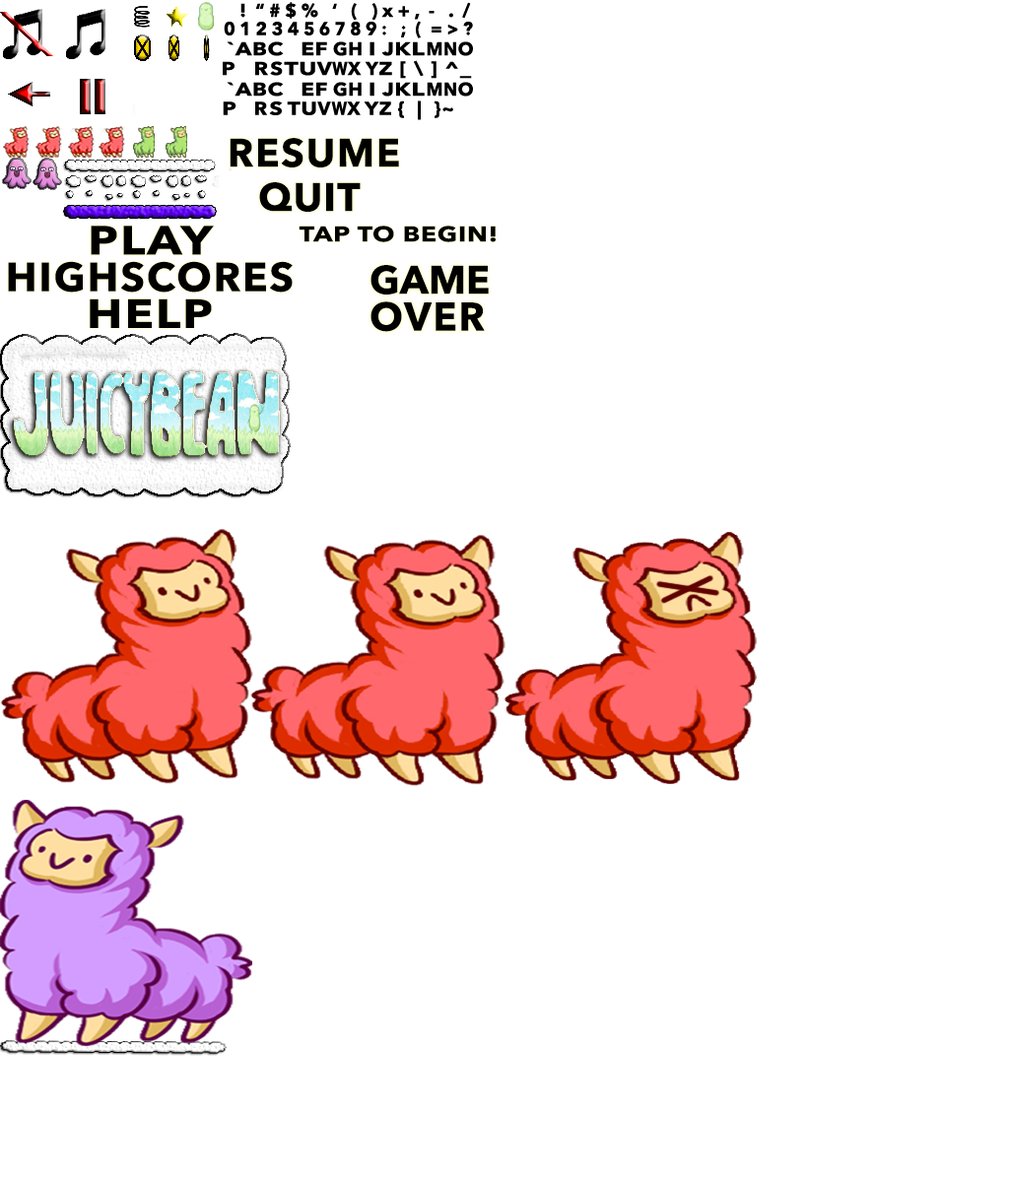
<style>
.page{position:relative;width:1009px;height:1182px;background:#ffffff}
.page>*{position:absolute;margin:0}
.t1{font:18.4px "AvenirNextLTPro-Bold";color:#000000}
.t2{font:18.4px "AvenirNextLTPro-Bold";color:#000000;scale:0.97 1}
.t3{font:18.4px "AvenirNextLTPro-Bold";color:#000000;scale:0.94 1}
.t4{font:18.4px "AvenirNextLTPro-Bold";color:#000000;scale:0.91 1}
.t5{font:18.4px "AvenirNextLTPro-Bold";letter-spacing:0.03em;color:#000000;scale:1.2 1}
.t6{font:18.4px "AvenirNextLTPro-Bold";letter-spacing:0.03em;color:#000000;scale:1.03 1}
.t7{font:18.4px "AvenirNextLTPro-Bold";letter-spacing:0.03em;color:#000000;scale:1.25 1}
.t8{font:18.4px "AvenirNextLTPro-Bold";letter-spacing:0.03em;color:#000000;scale:1.4 1}
.t9{font:18.4px "AvenirNextLTPro-Bold";letter-spacing:0.03em;color:#000000;scale:0.95 1}
.t10{font:18.4px "AvenirNextLTPro-Bold";letter-spacing:0.03em;color:#000000;scale:0.96 1}
.t11{font:18.4px "AvenirNextLTPro-Bold";letter-spacing:0.03em;color:#000000}
.t12{font:18.4px "AvenirNextLTPro-Bold";letter-spacing:0.03em;color:#000000;scale:1.17 1}
.t13{font:18.4px "AvenirNextLTPro-Bold";letter-spacing:0.03em;color:#000000;scale:1.3 1}
.t14{font:18.4px "AvenirNextLTPro-Bold";letter-spacing:0.03em;color:#000000;scale:1.15 1}
.t15{font:18.4px "AvenirNextLTPro-Bold";letter-spacing:0.03em;color:#000000;scale:0.8 1}
.t16{font:18.4px "AvenirNextLTPro-Bold";letter-spacing:0.03em;color:#000000;scale:1.1 1}
.t17{font:39.4px "AvenirNextLTPro-Bold";letter-spacing:0.045em;color:#000000}
.t18{font:39.4px "AvenirNextLTPro-Bold";letter-spacing:0.03em;color:#000000}
.t19{font:35.4px "AvenirNextLTPro-Bold";letter-spacing:0.03em;color:#000000;scale:1.22 1}
.t20{font:40.2px/36.7px "AvenirNextLTPro-Bold";letter-spacing:0.045em;color:#000000}
.t21{font:40.2px/36.7px "AvenirNextLTPro-Bold";letter-spacing:0.045em;color:#000000;scale:1.18 1}
.t22{font:21.3px "AvenirNextLTPro-Bold";letter-spacing:0.03em;color:#000000;scale:1.22 1}
.t23{font:39.4px/36.7px "AvenirNextLTPro-Bold";color:#000000}
.t24{font:39.4px/36.7px "AvenirNextLTPro-Bold";letter-spacing:0.045em;color:#000000}
</style>
<div class="page">
<p class="t1" style="left:240px;top:2px;width:231px;height:19px">!  “ # $ %   ‘   (   ) x + ,  -   .  /</p>
<p class="t2" style="left:224px;top:21px;width:249px;height:17px">0 1 2 3 4 <span class="t3">5 6 7 8 </span>9 :   ;  (  = &gt; ?<br><span class="t4"> ?</span></p>
<p class="t5" style="left:227px;top:41px;width:246px;height:15px">`ABC     EF <span class="t6">GH </span><span class="t7">I </span>JK<span class="t8">L </span><span class="t9">M</span><span class="t10">N</span><span class="t11">O</span></p>
<p class="t5" style="left:223px;top:60px;width:249px;height:19px"><span class="t12">P    R  S </span><span class="t13">TU</span><span class="t14">V</span><span class="t15">W</span><span class="t11">X Y</span>Z [ \ ] ^_</p>
<p class="t5" style="left:227px;top:82px;width:246px;height:15px">`ABC     EF <span class="t6">GH </span><span class="t7">I </span>JK<span class="t8">L </span><span class="t9">M</span><span class="t10">N</span><span class="t11">O</span></p>
<p class="t16" style="left:223px;top:100px;width:230px;height:20px"><span class="t5"> P</span>   R <span class="t5">S TU</span><span class="t11">V </span><span class="t15">W</span><span class="t11">X </span>YZ {  |  }~</p>
<p class="t17" style="left:230px;top:138px;width:169px;height:29px">RESUME</p>
<p class="t18" style="left:259px;top:182px;width:102px;height:30px"><span class="t19"> </span>QUIT</p>
<p class="t20" style="left:8px;top:226px;width:285px;height:102px;text-align:center"><span class="t21">PLAY<br></span>HIGHSCORES<br><span class="t21">HELP</span></p>
<p class="t22" style="left:298px;top:226px;width:198px;height:16px">TAP TO BEGIN!</p>
<p class="t23" style="left:370px;top:265px;width:119px;height:67px">GAME<br><span class="t24">OVER</span></p>
</div>
